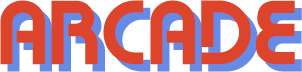
<style>
.page{position:relative;width:302px;height:72px;background:#dc442c}
.page>*{position:absolute;margin:0}
.t1{font:91px "Retrahaus";color:#dc442c;text-transform:uppercase}
.t2{font:91px "Retrahaus";text-transform:uppercase}
</style>
<div class="page">
<p class="t1" style="left:0px;top:0px;width:295px;height:65px">ARCADE</p>
<p class="t2" style="left:7px;top:7px;width:295px;height:65px">ARCADE</p>
</div>
